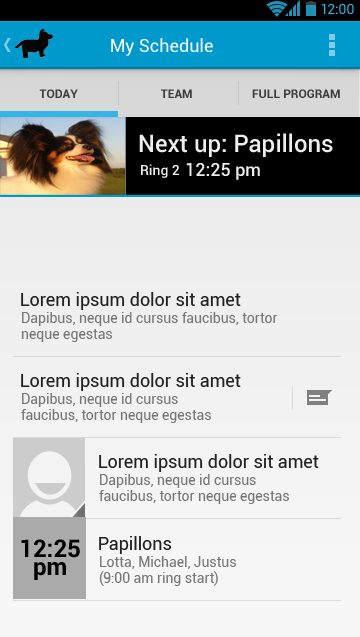
<style>
.page{position:relative;width:360px;height:637px}
.page>*{position:absolute;margin:0}
.t1{font:14px "Roboto-Regular";color:#33b5e5}
.t2{font:18px "Roboto-Regular";color:#ffffff}
.t3{font:12px "Roboto-Bold";color:#3d3d3d}
.t4{font:24px "Roboto-Medium";color:#eeeeee}
.t5{font:14px "Roboto-Medium";color:#eeeeee}
.t6{font:18px "Roboto-Medium";color:#eeeeee}
.t7{font:18px "Roboto-Regular";color:#222222}
.t8{font:14px/16px "Roboto-Regular";color:#777777}
.t9{font:24px/18px "Roboto-Bold";color:#000000}
</style>
<div class="page">
<p class="t1" style="left:321px;top:4px;width:33px;height:10px">12:00</p>
<p class="t2" style="left:111px;top:38px;width:102px;height:18px">My Schedule</p>
<p class="t3" style="left:39px;top:89px;width:39px;height:9px">TODAY</p>
<p class="t3" style="left:161px;top:89px;width:31px;height:9px">TEAM</p>
<p class="t3" style="left:252px;top:89px;width:88px;height:9px">FULL PROGRAM</p>
<p class="t4" style="left:139px;top:133px;width:194px;height:24px">Next up: Papillons</p>
<p class="t5" style="left:141px;top:164px;width:38px;height:14px">Ring 2</p>
<p class="t6" style="left:186px;top:163px;width:74px;height:17px">12:25 pm</p>
<p class="t7" style="left:21px;top:292px;width:220px;height:18px">Lorem ipsum dolor sit amet</p>
<p class="t8" style="left:21px;top:312px;width:257px;height:30px">Dapibus, neque id cursus faucibus, tortor <br>neque egestas</p>
<p class="t7" style="left:21px;top:373px;width:220px;height:18px">Lorem ipsum dolor sit amet</p>
<p class="t8" style="left:21px;top:393px;width:190px;height:30px">Dapibus, neque id cursus <br>faucibus, tortor neque egestas</p>
<p class="t7" style="left:99px;top:454px;width:220px;height:18px">Lorem ipsum dolor sit amet</p>
<p class="t8" style="left:99px;top:474px;width:190px;height:30px">Dapibus, neque id cursus <br>faucibus, tortor neque egestas</p>
<p class="t9" style="left:21px;top:539px;width:59px;height:41px;text-align:center">12:25<br>pm</p>
<p class="t7" style="left:99px;top:536px;width:73px;height:18px">Papillons</p>
<p class="t8" style="left:99px;top:556px;width:137px;height:30px">Lotta, Michael, Justus<br>(9:00 am ring start)</p>
</div>
